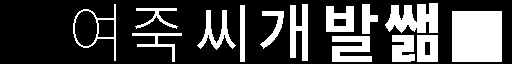
<style>
.page{position:relative;width:512px;height:64px;background:#000000}
.page>*{position:absolute;margin:0}
.t1{font:64px "NotoSansCJKkr-Thin";color:#ffffff}
.t2{font:64px "NotoSansCJKkr-Regular";color:#ffffff}
.t3{font:64px "NotoSansCJKkr-Medium";color:#ffffff}
.t4{font:64px "NotoSansCJKkr-Bold";color:#ffffff}
.t5{font:64px "NotoSansCJKkr-Black";color:#ffffff}
.t6{font:64px "NotoSansCJKkr-Light";color:#ffffff}
</style>
<div class="page">
<p class="t1" style="left:73px;top:4px;width:43px;height:57px">여</p>
<p class="t2" style="left:197px;top:5px;width:48px;height:57px">씨</p>
<p class="t3" style="left:260px;top:4px;width:48px;height:57px">개</p>
<p class="t4" style="left:326px;top:4px;width:52px;height:58px">발</p>
<p class="t5" style="left:385px;top:3px;width:53px;height:59px">쌞</p>
<p class="t6" style="left:132px;top:8px;width:50px;height:54px">죽</p>
</div>
